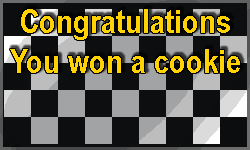
<style>
.page{position:relative;width:250px;height:150px;background:#0d0e0f}
.page>*{position:absolute;margin:0}
.t1{font:33.3px "ArialNarrow-Bold";color:#ffd200}
</style>
<div class="page">
<p class="t1" style="left:10px;top:9px;width:230px;height:64px;text-align:center">Congratulations<br>You won a cookie</p>
</div>
